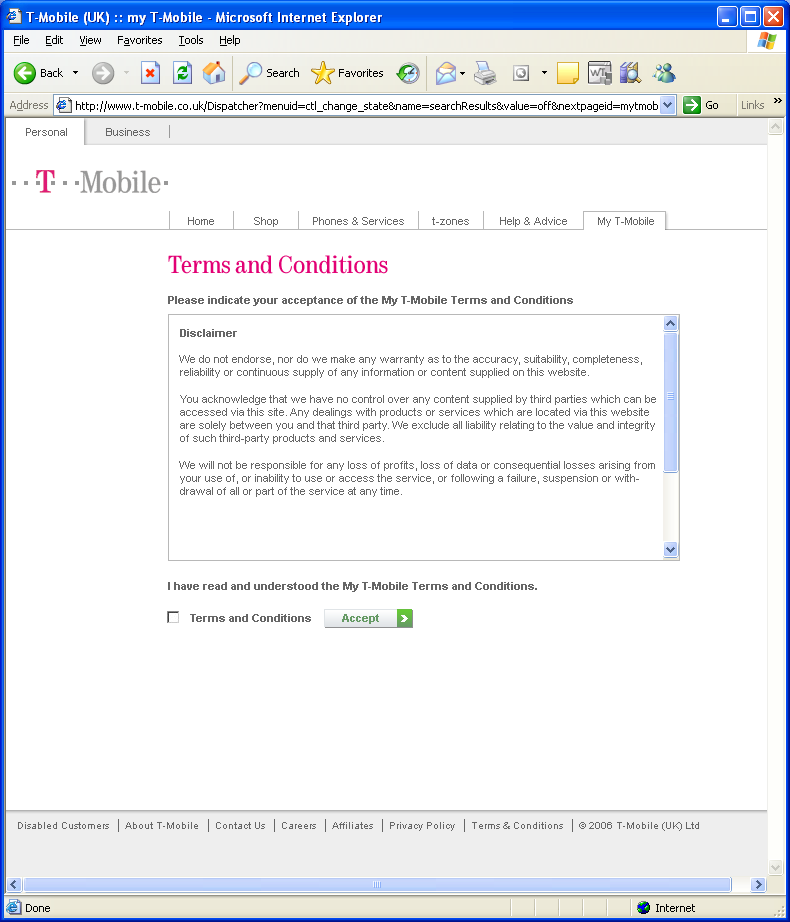
<style>
.page{position:relative;width:790px;height:922px;background:#ffffff}
.page>*{position:absolute;margin:0}
.t1{font:26px "Tele-Antiqua";color:#e20074}
.t2{font:11px "Arial-BoldMT";color:#666666}
.t3{font:11px "ArialMT";color:#666666}
.t4{font:11px "Arial-BoldMT";color:#669a65}
</style>
<div class="page">
<p class="t1" style="left:168px;top:255px;width:220px;height:19px">Terms and Conditions</p>
<p class="t2" style="left:168px;top:296px;width:405px;height:10px">Please indicate your acceptance of the My T-Mobile Terms and Conditions</p>
<p class="t3" style="left:179px;top:329px;width:477px;height:168px"><span class="t2">Disclaimer<br><br></span>We do not endorse, nor do we make any warranty as to the accuracy, suitability, completeness, reliability or continuous supply of any information or content supplied on this website.<br><br>You acknowledge that we have no control over any content supplied by third parties which can be accessed via this site. Any dealings with products or services which are located via this website are solely between you and that third party. We exclude all liability relating to the value and integrity of such third-party products and services.<br><br>We will not be responsible for any loss of profits, loss of data or consequential losses arising from your use of, or inability to use or access the service, or following a failure, suspension or withdrawal of all or part of the service at any time.</p>
<p class="t2" style="left:168px;top:582px;width:369px;height:10px">I have read and understood the My T-Mobile Terms and Conditions.</p>
<p class="t2" style="left:190px;top:614px;width:121px;height:8px">Terms and Conditions</p>
<p class="t4" style="left:342px;top:614px;width:37px;height:10px">Accept</p>
</div>
